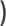
<style>
.page{position:relative;width:6px;height:26px;background:#ffffff}
.page>*{position:absolute;margin:0}
.t1{font:30px "Calibri";color:#3c3c3c}
</style>
<div class="page">
<p class="t1" style="left:0px;top:0px;width:6px;height:26px">)</p>
</div>
